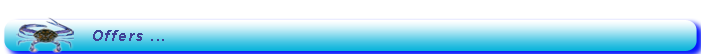
<style>
.page{position:relative;width:701px;height:54px;background:#ffffff}
.page>*{position:absolute;margin:0}
.t1{font:14.8px "Arial-BoldMT";letter-spacing:0.1em;color:#3e4095;font-style:italic}
</style>
<div class="page">
<p class="t1" style="left:93px;top:30px;width:71px;height:11px">Offers ...</p>
</div>
